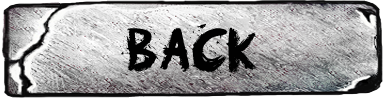
<style>
.page{position:relative;width:384px;height:98px}
.page>*{position:absolute;margin:0}
.t1{font:55px "OhNo";color:#010101}
</style>
<div class="page">
<p class="t1" style="left:120px;top:24px;width:137px;height:53px">BACK</p>
</div>
